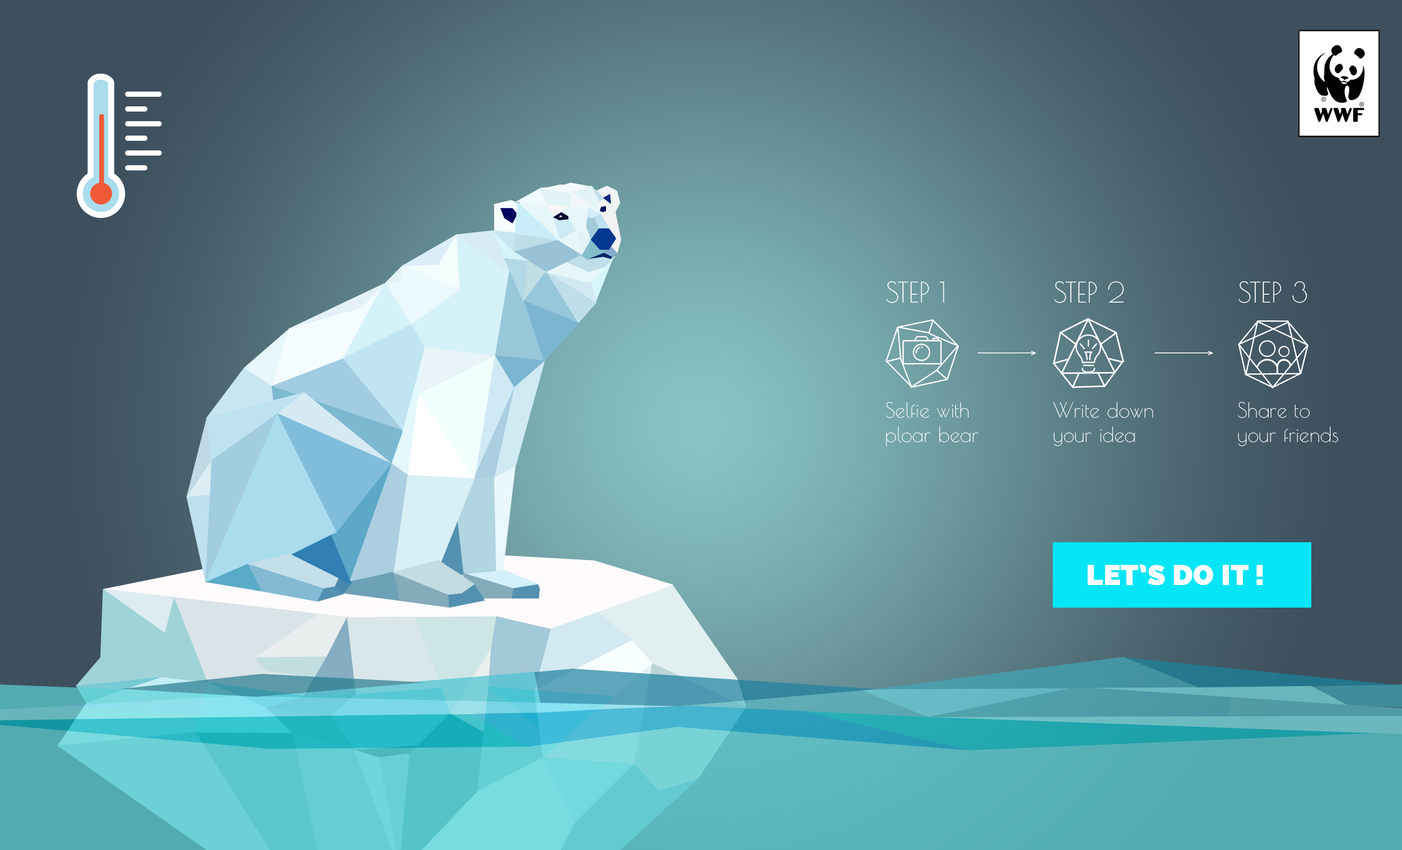
<style>
.page{position:relative;width:1402px;height:850px}
.page>*{position:absolute;margin:0}
.t1{font:27.7px "PoiretOne-Regular";color:#ffffff}
.t2{font:20.5px "PoiretOne-Regular";color:#ffffff}
.t3{font:27.8px "Raleway-Heavy";color:#ffffff;text-transform:uppercase;font-weight:bold}
</style>
<div class="page">
<p class="t1" style="left:887px;top:281px;width:57px;height:22px">STEP 1</p>
<p class="t1" style="left:1054px;top:281px;width:70px;height:22px">STEP 2</p>
<p class="t1" style="left:1239px;top:281px;width:68px;height:22px">STEP 3</p>
<p class="t2" style="left:886px;top:402px;width:93px;height:45px">Selfie with <br>ploar bear</p>
<p class="t2" style="left:1054px;top:402px;width:99px;height:45px">Write down<br>your idea</p>
<p class="t2" style="left:1238px;top:402px;width:101px;height:45px">Share to <br>your friends</p>
<p class="t3" style="left:1088px;top:565px;width:175px;height:21px">let’s do it !</p>
</div>
